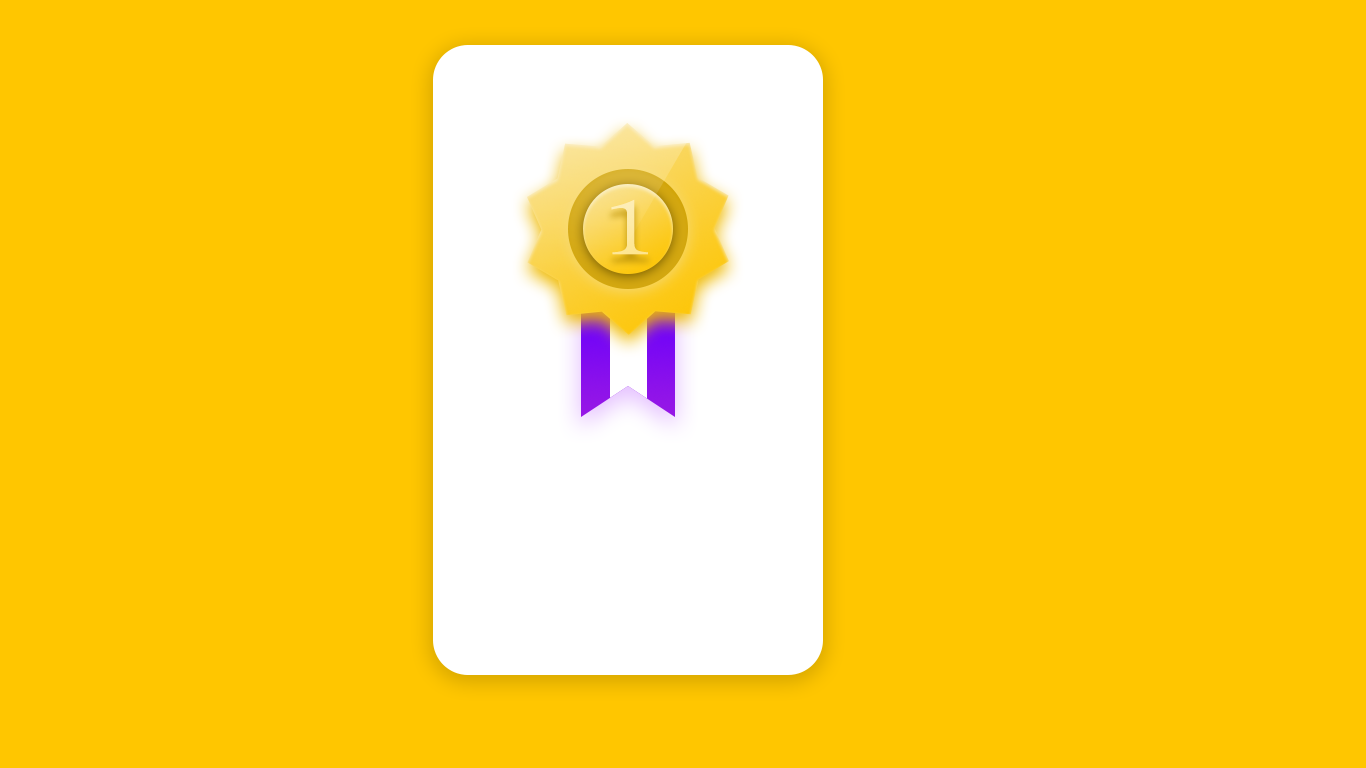
<style>
.page{position:relative;width:1366px;height:768px;background:#ffc600}
.page>*{position:absolute;margin:0}
.t1{font:79.2px "SIL-Kai-Reg-Jian";letter-spacing:0.02em;color:#fee9a3;scale:1.46 1}
</style>
<div class="page">
<p class="t1" style="left:611px;top:199px;width:37px;height:56px">1</p>
</div>
